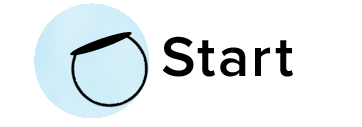
<style>
.page{position:relative;width:362px;height:127px;background:#ffffff}
.page>*{position:absolute;margin:0}
.t1{font:58px "ProximaNova-Semibold";letter-spacing:0.05em;color:#000000}
</style>
<div class="page">
<p class="t1" style="left:162px;top:36px;width:131px;height:41px">Start</p>
</div>
